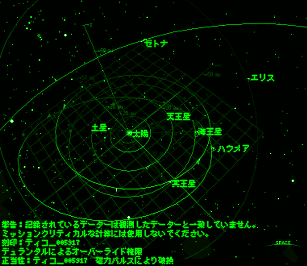
<style>
.page{position:relative;width:307px;height:266px;background:#000200}
.page>*{position:absolute;margin:0}
.t1{font:8px "MisakiGothic";color:#00ff00}
.t2{font:8px/9px "MisakiGothic";color:#00ff00}
</style>
<div class="page">
<p class="t1" style="left:144px;top:39px;width:24px;height:9px">ゼトナ</p>
<p class="t1" style="left:250px;top:73px;width:25px;height:9px">エリス</p>
<p class="t1" style="left:166px;top:112px;width:25px;height:9px">天王星</p>
<p class="t1" style="left:91px;top:123px;width:16px;height:9px">土星</p>
<p class="t1" style="left:132px;top:129px;width:17px;height:9px">太陽</p>
<p class="t1" style="left:198px;top:127px;width:24px;height:9px">海王星</p>
<p class="t1" style="left:217px;top:144px;width:32px;height:9px">ハウメア</p>
<p class="t1" style="left:172px;top:179px;width:24px;height:9px">冥王星</p>
<p class="t2" style="left:1px;top:220px;width:255px;height:45px">警告：記録されているデーターは観測したデーターと一致していません。<br>ミッションクリティカルな計算には使用しないでください。<br>刻印：ティコ＿005917<br>デュランダルによるオーバーライド権限<br>正当性：ティコ＿005917　磁力パルスにより破損</p>
</div>
